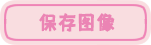
<style>
.page{position:relative;width:151px;height:45px;background:#f9dde0}
.page>*{position:absolute;margin:0}
.t1{font:12px "shetumodengxiaofangti";color:#eb84b4;font-weight:bold;scale:0.94 1}
</style>
<div class="page">
<p class="t1" style="left:39px;top:13px;width:76px;height:19px">保存图像</p>
</div>
